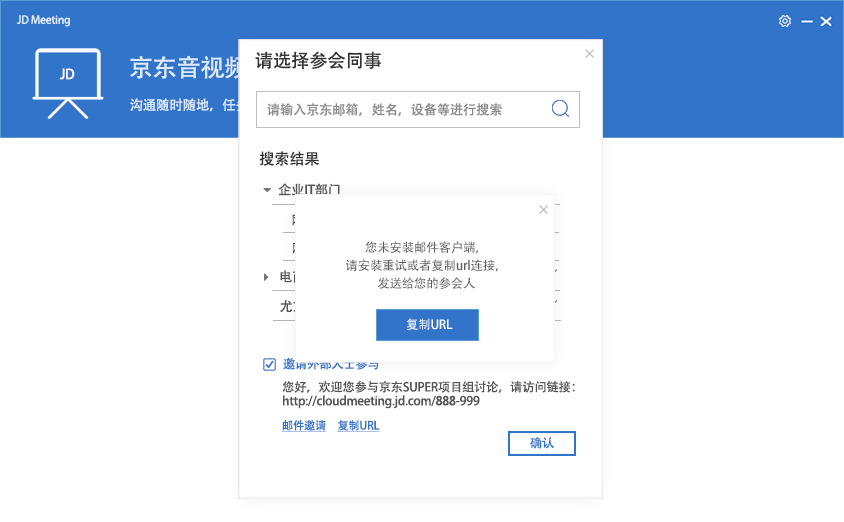
<style>
.page{position:relative;width:844px;height:522px;background:#ffffff}
.page>*{position:absolute;margin:0}
.t1{font:10.8px "AdobeHeitiStd-Regular";letter-spacing:-0.02em;color:#dbeaff}
.t2{font:18.4px "AdobeHeitiStd-Regular";letter-spacing:-0.02em;color:#333333}
.t3{font:24.3px "AdobeHeitiStd-Regular";letter-spacing:-0.02em;color:#dbeaff}
.t4{font:13.5px "AdobeHeitiStd-Regular";letter-spacing:-0.02em;color:#fefefe}
.t5{font:13.5px "AdobeHeitiStd-Regular";letter-spacing:-0.02em}
.t6{font:13.3px "AdobeHeitiStd-Regular";letter-spacing:-0.02em;color:#898989}
.t7{font:15.3px "AdobeHeitiStd-Regular";letter-spacing:-0.02em;color:#333333}
.t8{font:13.3px "AdobeHeitiStd-Regular";letter-spacing:-0.02em;color:#555555}
.t9{font:12.5px/9px "AdobeHeitiStd-Regular";letter-spacing:-0.02em;color:#5e5e5e}
.t10{font:12.5px "AdobeHeitiStd-Regular";letter-spacing:-0.02em;color:#ffffff}
.t11{font:12.3px "AdobeHeitiStd-Regular";letter-spacing:-0.02em}
.t12{font:12.3px/4.6px "AdobeHeitiStd-Regular";letter-spacing:-0.02em;color:#555555}
.t13{font:11.2px "AdobeHeitiStd-Regular";letter-spacing:-0.02em;color:#3174ca;text-decoration:underline}
.t14{font:12.3px "AdobeHeitiStd-Regular";letter-spacing:-0.02em;color:#3174ca}
</style>
<div class="page">
<p class="t1" style="left:17px;top:15px;width:53px;height:12px">JD Meeting</p>
<p class="t2" style="left:255px;top:51px;width:126px;height:18px">请选择参会同事</p>
<p class="t3" style="left:130px;top:55px;width:166px;height:24px">京东音视频会议</p>
<p class="t4" style="left:59px;top:68px;width:16px;height:12px">JD</p>
<p class="t5" style="left:130px;top:98px;width:199px;height:14px">沟通随时随地，任务下达必有反馈</p>
<p class="t6" style="left:267px;top:103px;width:235px;height:13px">请输入京东邮箱，姓名，设备等进行搜索</p>
<p class="t7" style="left:259px;top:151px;width:60px;height:15px">搜索结果</p>
<p class="t8" style="left:278px;top:183px;width:62px;height:13px">企业IT部门</p>
<p class="t9" style="left:346px;top:241px;width:152px;height:48px;text-align:center">您未安装邮件客户端，<br><br>请安装重试或者复制url连接，<br><br>发送给您的参会人</p>
<p class="t10" style="left:406px;top:318px;width:47px;height:12px">复制URL</p>
<p class="t11" style="left:283px;top:358px;width:96px;height:12px">邀请外部人士参与</p>
<p class="t12" style="left:282px;top:381px;width:293px;height:28px">您好，欢迎您参与京东SUPER项目组讨论，请访问链接：<br><br><br>http://cloudmeeting.jd.com/888-999</p>
<p class="t13" style="left:281px;top:420px;width:46px;height:12px">邮件邀请</p>
<p class="t13" style="left:337px;top:420px;width:43px;height:12px">复制URL</p>
<p class="t14" style="left:530px;top:437px;width:24px;height:12px">确认</p>
</div>
